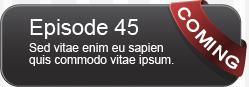
<style>
.page{position:relative;width:249px;height:87px}
.page>*{position:absolute;margin:0}
.t1{font:22px "ArialMT";color:#ffffff;font-variant:small-caps}
.t2{font:22px "ArialMT";color:#ffffff}
.t3{font:12px/12px "ArialMT";color:#ffffff}
</style>
<div class="page">
<p class="t1" style="left:178px;top:7px;width:62px;height:62px;rotate:45deg">coming</p>
<p class="t2" style="left:30px;top:19px;width:109px;height:20px">Episode 45</p>
<p class="t3" style="left:29px;top:43px;width:145px;height:23px">Sed vitae enim eu sapien<br>quis commodo vitae ipsum.</p>
</div>
